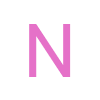
<style>
.page{position:relative;width:100px;height:100px;background:#ffffff}
.page>*{position:absolute;margin:0}
.t1{font:75px "Roboto-Regular";color:#e571c8}
</style>
<div class="page">
<p class="t1" style="left:29px;top:24px;width:42px;height:53px">N</p>
</div>
